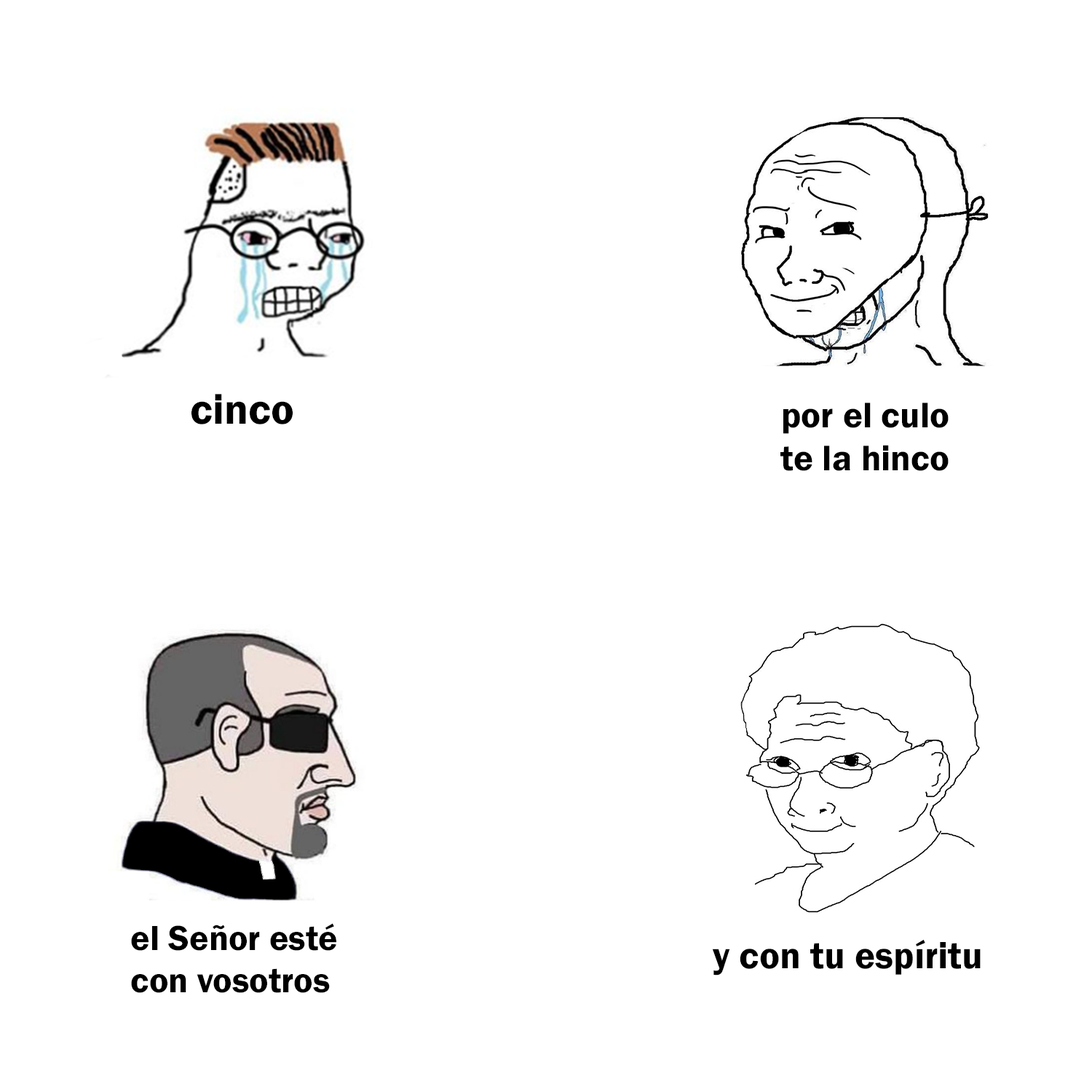
<style>
.page{position:relative;width:1092px;height:1092px;background:#ffffff}
.page>*{position:absolute;margin:0}
.t1{font:43.7px "FranklinGothic-Demi";color:#000000}
.t2{font:36.7px "FranklinGothic-Demi";color:#000000}
.t3{font:36px "FranklinGothic-Demi";color:#000000}
.t4{font:38.5px "FranklinGothic-Demi";color:#000000}
</style>
<div class="page">
<p class="t1" style="left:191px;top:394px;width:102px;height:30px">cinco</p>
<p class="t2" style="left:780px;top:403px;width:169px;height:68px;text-align:right">por el culo<br>te la hinco</p>
<p class="t3" style="left:131px;top:923px;width:205px;height:70px">el Señor esté<br>con vosotros</p>
<p class="t4" style="left:712px;top:939px;width:269px;height:37px">y con tu espíritu</p>
</div>
